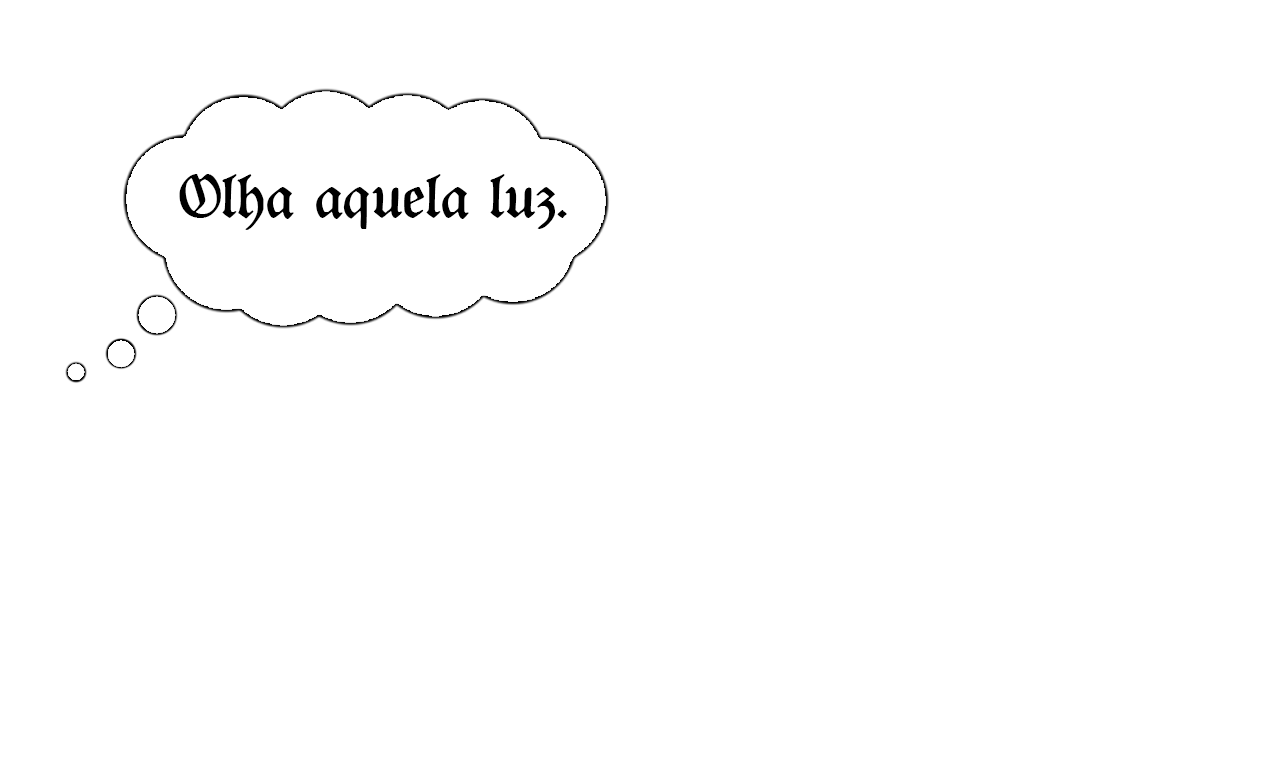
<style>
.page{position:relative;width:1280px;height:768px;background:#ffffff}
.page>*{position:absolute;margin:0}
.t1{font:60.5px "Rediviva";color:#000000}
</style>
<div class="page">
<p class="t1" style="left:179px;top:174px;width:388px;height:56px">Olha aquela luz.</p>
</div>
